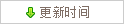
<style>
.page{position:relative;width:124px;height:24px;background:#ffffff}
.page>*{position:absolute;margin:0}
.t1{font:12px "SimSun";letter-spacing:0.05em;color:#806f66}
</style>
<div class="page">
<p class="t1" style="left:40px;top:6px;width:49px;height:12px">更新时间</p>
</div>
